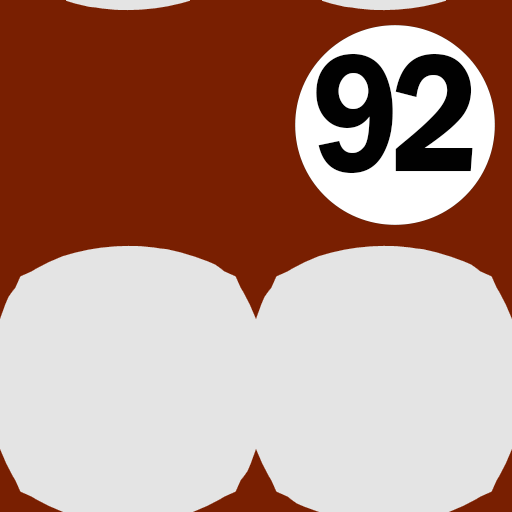
<style>
.page{position:relative;width:512px;height:512px;background:#e4e4e4}
.page>*{position:absolute;margin:0}
.t1{font:172.5px "FranklinGothic-Demi";letter-spacing:-0.05em;color:#010101;scale:0.87 1}
</style>
<div class="page">
<p class="t1" style="left:316px;top:54px;width:157px;height:119px">92</p>
</div>
